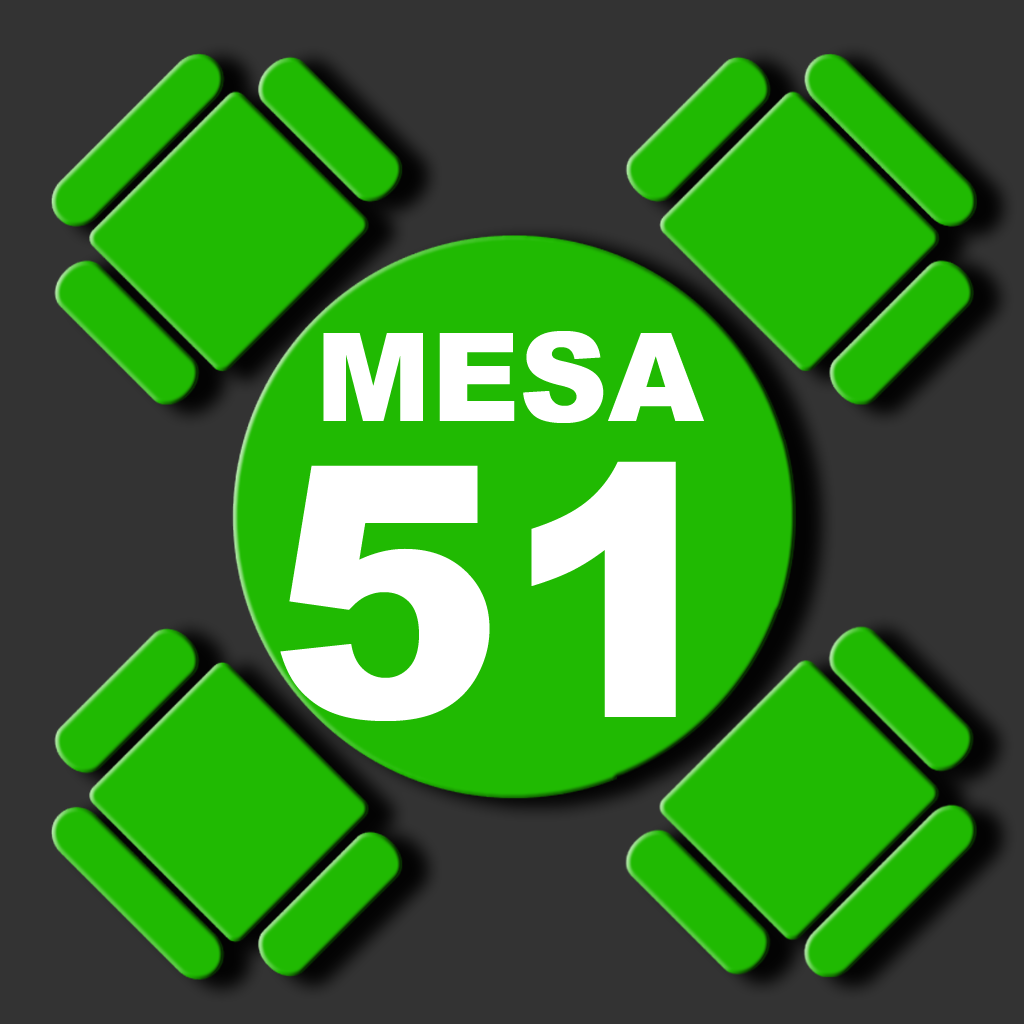
<style>
.page{position:relative;width:1024px;height:1024px;background:#20ba02}
.page>*{position:absolute;margin:0}
.t1{font:122.6px "Arial-Black";color:#ffffff;text-transform:uppercase}
.t2{font:351px "Arial-Black";color:#ffffff;text-transform:uppercase}
</style>
<div class="page">
<p class="t1" style="left:323px;top:331px;width:381px;height:92px">mesa</p>
<p class="t2" style="left:280px;top:461px;width:396px;height:260px">51</p>
</div>
